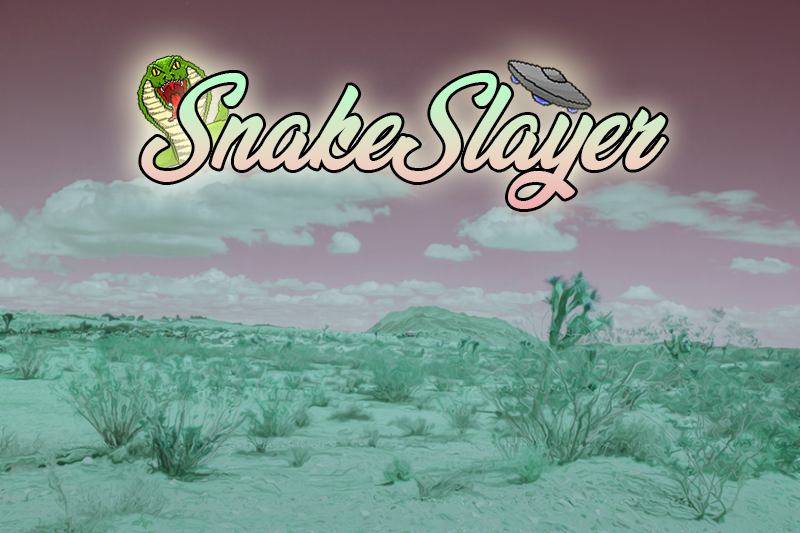
<style>
.page{position:relative;width:800px;height:533px}
.page>*{position:absolute;margin:0}
.t1{font:90.5px "VeganStylePersonalUse";color:#e2dfc5}
</style>
<div class="page">
<p class="t1" style="left:141px;top:73px;width:526px;height:136px">SnakeSlayer</p>
</div>
